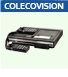
<style>
.page{position:relative;width:68px;height:77px;background:#f0fded}
.page>*{position:absolute;margin:0}
.t1{font:9px "Corbel-Bold";letter-spacing:-0.03em;color:#ffffff;text-transform:uppercase}
</style>
<div class="page">
<p class="t1" style="left:4px;top:3px;width:60px;height:6px">colecovision</p>
</div>
